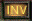
<style>
.page{position:relative;width:32px;height:21px}
.page>*{position:absolute;margin:0}
.t1{font:11.3px "Helvetica-Light";letter-spacing:0.1em;color:#fbfb5e}
.t2{font:11.3px "Helvetica-Light";letter-spacing:0.05em;color:#fbfb5e}
</style>
<div class="page">
<p class="t1" style="left:8px;top:5px;width:19px;height:9px"><span class="t2">I</span>NV</p>
</div>
